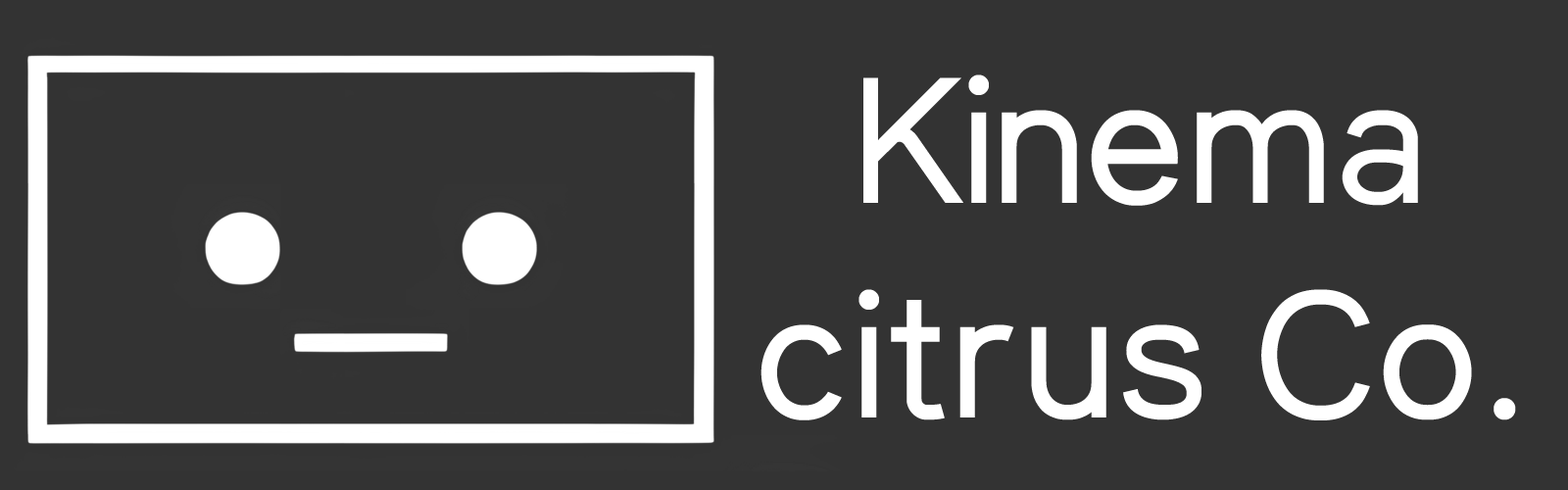
<style>
.page{position:relative;width:1568px;height:490px;background:#333333}
.page>*{position:absolute;margin:0}
.t1{font:178.4px "SKCuriosity-Regular";letter-spacing:-0.005em;color:#ffffff}
</style>
<div class="page">
<p class="t1" style="left:760px;top:74px;width:756px;height:346px;text-align:center">Kinema<br>citrus Co.</p>
</div>
